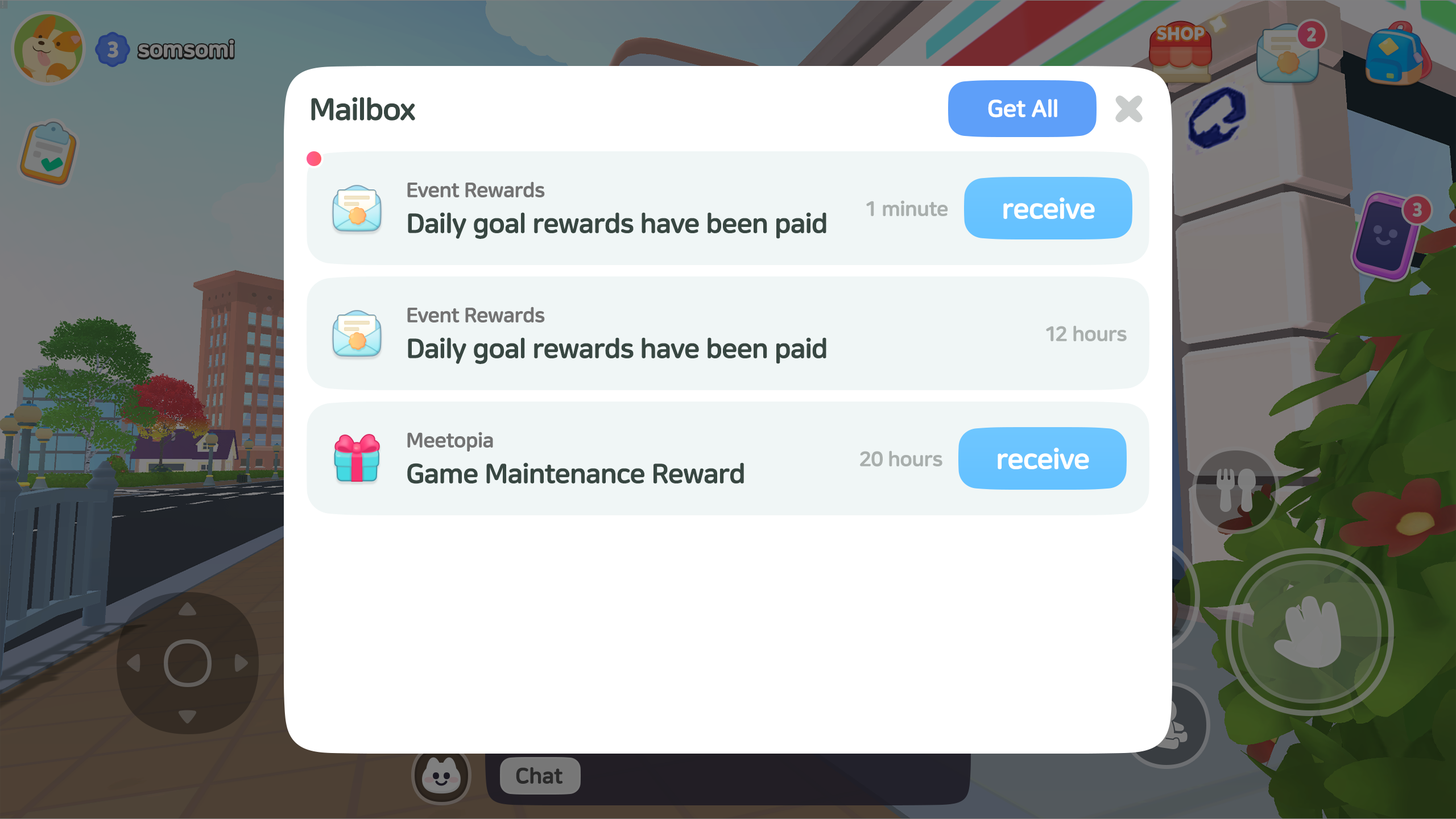
<style>
.page{position:relative;width:1456px;height:819px;background:#ffffff}
.page>*{position:absolute;margin:0}
.t1{font:30.7px "NanumSquareRoundOTFEB";letter-spacing:-0.02em;color:#384742}
.t2{font:23.9px "NanumSquareRoundOTFEB";letter-spacing:-0.02em;color:#ffffff}
.t3{font:20.5px "NanumSquareRoundOTFEB";letter-spacing:-0.02em;color:#737373}
.t4{font:28.4px "NanumSquareRoundOTFEB";letter-spacing:-0.02em;color:#ffffff}
.t5{font:20.5px "NanumSquareRoundOTFEB";letter-spacing:-0.02em;color:#a9afad}
.t6{font:27.3px "NanumSquareRoundOTFEB";letter-spacing:-0.02em;color:#384742}
</style>
<div class="page">
<p class="t1" style="left:311px;top:97px;width:104px;height:24px">Mailbox</p>
<p class="t2" style="left:988px;top:99px;width:69px;height:19px">Get All</p>
<p class="t3" style="left:407px;top:181px;width:138px;height:16px">Event Rewards</p>
<p class="t4" style="left:1003px;top:197px;width:92px;height:22px">receive</p>
<p class="t5" style="left:866px;top:200px;width:82px;height:16px">1 minute</p>
<p class="t6" style="left:408px;top:212px;width:418px;height:27px">Daily goal rewards have been paid</p>
<p class="t3" style="left:407px;top:307px;width:138px;height:15px">Event Rewards</p>
<p class="t5" style="left:1046px;top:325px;width:81px;height:16px">12 hours</p>
<p class="t6" style="left:408px;top:337px;width:418px;height:27px">Daily goal rewards have been paid</p>
<p class="t3" style="left:407px;top:432px;width:86px;height:20px">Meetopia</p>
<p class="t4" style="left:998px;top:448px;width:91px;height:21px">receive</p>
<p class="t5" style="left:860px;top:450px;width:82px;height:17px">20 hours</p>
<p class="t6" style="left:407px;top:462px;width:337px;height:22px">Game Maintenance Reward</p>
</div>
